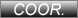
<style>
.page{position:relative;width:78px;height:18px}
.page>*{position:absolute;margin:0}
.t1{font:16px "Arial-ItalicMT";color:#ffffff}
</style>
<div class="page">
<p class="t1" style="left:14px;top:3px;width:50px;height:13px">COOR.</p>
</div>
